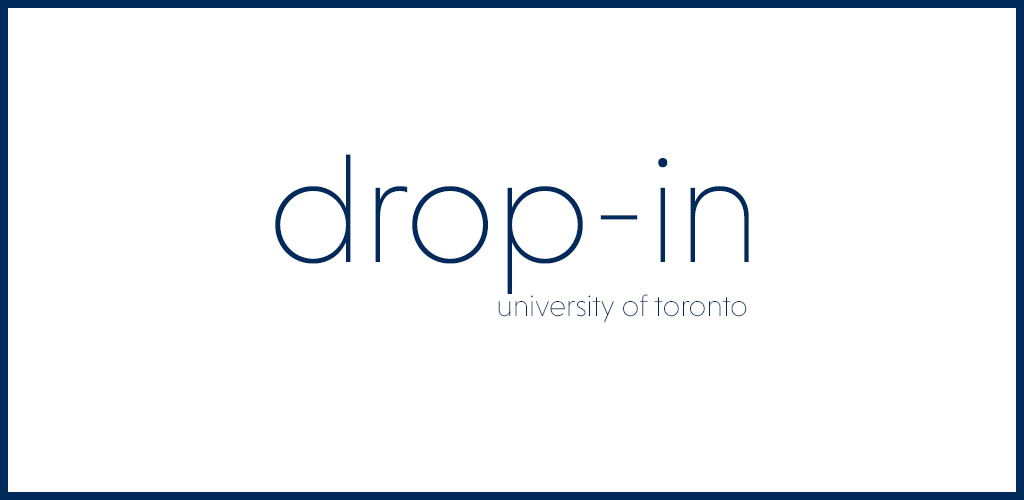
<style>
.page{position:relative;width:1024px;height:500px;background:#ffffff}
.page>*{position:absolute;margin:0}
.t1{font:156.1px "NiveauGroteskExtraLight";color:#002a5c}
.t2{font:30.8px "NiveauGroteskExtraLight";color:#002a5c}
</style>
<div class="page">
<p class="t1" style="left:275px;top:154px;width:474px;height:140px">drop-in</p>
<p class="t2" style="left:498px;top:294px;width:249px;height:29px">university of toronto</p>
</div>
